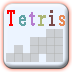
<style>
.page{position:relative;width:72px;height:72px;background:#ecf4ff}
.page>*{position:absolute;margin:0}
.t1{font:21.6px "SimSun";letter-spacing:0.08em;color:#ff0000;font-weight:bold;scale:0.7 1}
.t2{font:21.6px "SimSun";letter-spacing:0.08em;color:#61a3a5;font-weight:bold;scale:0.7 1}
.t3{font:21.6px "SimSun";letter-spacing:0.08em;color:#b57dcf;font-weight:bold;scale:0.7 1}
.t4{font:21.6px "SimSun";letter-spacing:0.08em;color:#acb675;font-weight:bold;scale:0.7 1}
.t5{font:21.6px "SimSun";letter-spacing:0.08em;color:#7a4b4b;font-weight:bold;scale:0.7 1}
.t6{font:21.6px "SimSun";letter-spacing:0.08em;color:#e78956;font-weight:bold;scale:0.7 1}
</style>
<div class="page">
<p class="t1" style="left:7px;top:10px;width:58px;height:16px">T<span class="t2">e</span><span class="t3">t</span><span class="t4">r</span><span class="t5">i</span><span class="t6">s</span></p>
</div>
